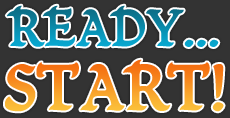
<style>
.page{position:relative;width:230px;height:118px;background:#333333}
.page>*{position:absolute;margin:0}
.t1{font:48px "Mikadan";letter-spacing:-0.025em;text-transform:uppercase;font-weight:bold}
.t2{font:60px "Mikadan";letter-spacing:-0.025em;text-transform:uppercase;font-weight:bold}
</style>
<div class="page">
<p class="t1" style="left:6px;top:5px;width:213px;height:42px">Ready...</p>
<p class="t2" style="left:5px;top:59px;width:219px;height:53px">Start!</p>
</div>
